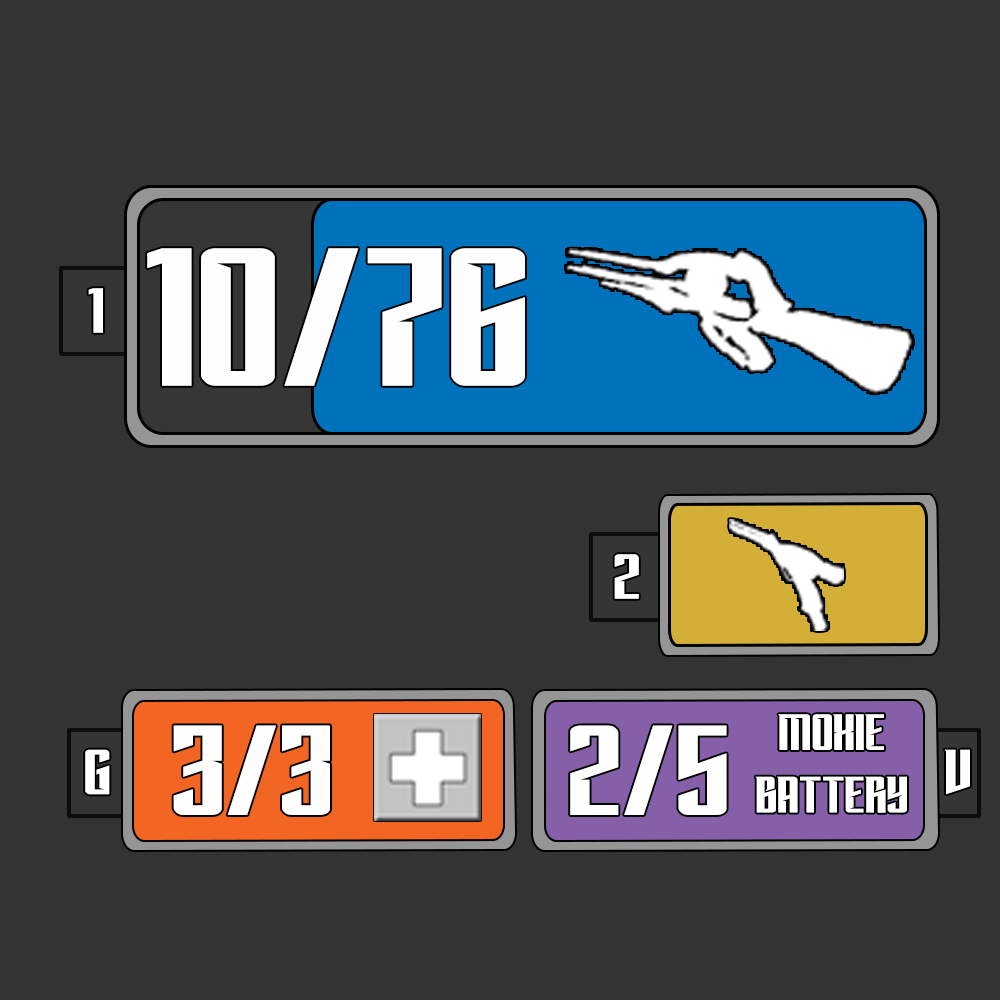
<style>
.page{position:relative;width:1000px;height:1000px;background:#333333}
.page>*{position:absolute;margin:0}
.t1{font:200.7px "Subspace";color:#fffefe}
.t2{font:65.2px "Subspace";color:#fffefe}
.t3{font:65.2px "Subspace";color:#ffffff}
.t4{font:130.4px "Subspace";color:#fffefe}
.t5{font:52.1px "Subspace";color:#ffffff}
</style>
<div class="page">
<p class="t1" style="left:147px;top:248px;width:378px;height:138px">10/76</p>
<p class="t2" style="left:88px;top:288px;width:15px;height:45px">1</p>
<p class="t3" style="left:614px;top:554px;width:25px;height:45px">2</p>
<p class="t4" style="left:173px;top:725px;width:157px;height:90px">3/3</p>
<p class="t4" style="left:570px;top:725px;width:157px;height:90px">2/5</p>
<p class="t5" style="left:755px;top:714px;width:152px;height:99px;text-align:center">MOXIE BATTERY</p>
<p class="t3" style="left:85px;top:749px;width:25px;height:46px">G</p>
<p class="t3" style="left:944px;top:749px;width:26px;height:46px">V</p>
</div>
